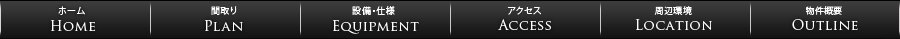
<style>
.page{position:relative;width:900px;height:39px}
.page>*{position:absolute;margin:0}
.t1{font:9px "KozGoPr6N-Regular";letter-spacing:0.05em;color:#ffffff}
.t2{font:14px "TrajanPro-Regular";letter-spacing:0.04em;color:#ffffff}
</style>
<div class="page">
<p class="t1" style="left:58px;top:6px;width:27px;height:9px">ホーム</p>
<p class="t1" style="left:211px;top:6px;width:26px;height:9px">間取り</p>
<p class="t1" style="left:352px;top:6px;width:43px;height:10px">設備・仕様</p>
<p class="t1" style="left:507px;top:6px;width:34px;height:9px">アクセス</p>
<p class="t1" style="left:654px;top:6px;width:38px;height:9px">周辺環境</p>
<p class="t1" style="left:806px;top:6px;width:36px;height:9px">物件概要</p>
<p class="t2" style="left:50px;top:20px;width:46px;height:11px">Home</p>
<p class="t2" style="left:204px;top:20px;width:39px;height:11px">Plan</p>
<p class="t2" style="left:332px;top:20px;width:87px;height:14px">Equipment</p>
<p class="t2" style="left:498px;top:19px;width:53px;height:11px">Access</p>
<p class="t2" style="left:635px;top:19px;width:77px;height:11px">Location</p>
<p class="t2" style="left:792px;top:19px;width:66px;height:11px">Outline</p>
</div>
